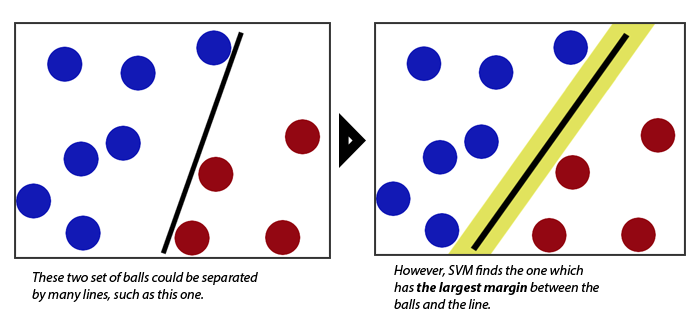
<style>
.page{position:relative;width:700px;height:334px;background:#ffffff}
.page>*{position:absolute;margin:0}
.t1{font:14px "MyriadPro-It";color:#000000}
.t2{font:14px "MyriadPro-BoldIt";color:#000000}
</style>
<div class="page">
<p class="t1" style="left:394px;top:265px;width:205px;height:44px">However, SVM finds the one which <br>has <span class="t2">the largest margin </span>between the <br>balls and the line.</p>
<p class="t1" style="left:32px;top:272px;width:226px;height:30px">These two set of balls could be separated<br>by many lines, such as this one.</p>
</div>
